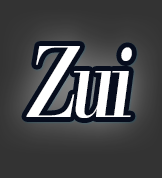
<style>
.page{position:relative;width:162px;height:178px;background:#333333}
.page>*{position:absolute;margin:0}
.t1{font:96px "KochoStd-Heavy";letter-spacing:-0.08em;color:#ffffff;font-style:italic;scale:0.75 1}
</style>
<div class="page">
<p class="t1" style="left:26px;top:46px;width:106px;height:72px">Zui</p>
</div>
